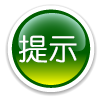
<style>
.page{position:relative;width:101px;height:101px;background:#ffffff}
.page>*{position:absolute;margin:0}
.t1{font:29.2px "YouYuan";color:#ffffff;font-weight:bold}
</style>
<div class="page">
<p class="t1" style="left:19px;top:35px;width:58px;height:28px">提示</p>
</div>
